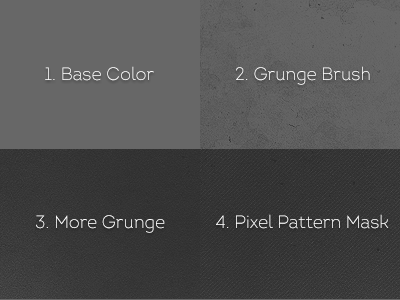
<style>
.page{position:relative;width:400px;height:300px;background:#676767}
.page>*{position:absolute;margin:0}
.t1{font:18px "Intro-Light";color:#ffffff}
</style>
<div class="page">
<p class="t1" style="left:45px;top:66px;width:109px;height:15px">1. Base Color</p>
<p class="t1" style="left:236px;top:66px;width:134px;height:19px">2. Grunge Brush</p>
<p class="t1" style="left:36px;top:215px;width:129px;height:18px">3. More Grunge</p>
<p class="t1" style="left:216px;top:214px;width:173px;height:15px">4. Pixel Pattern Mask</p>
</div>
